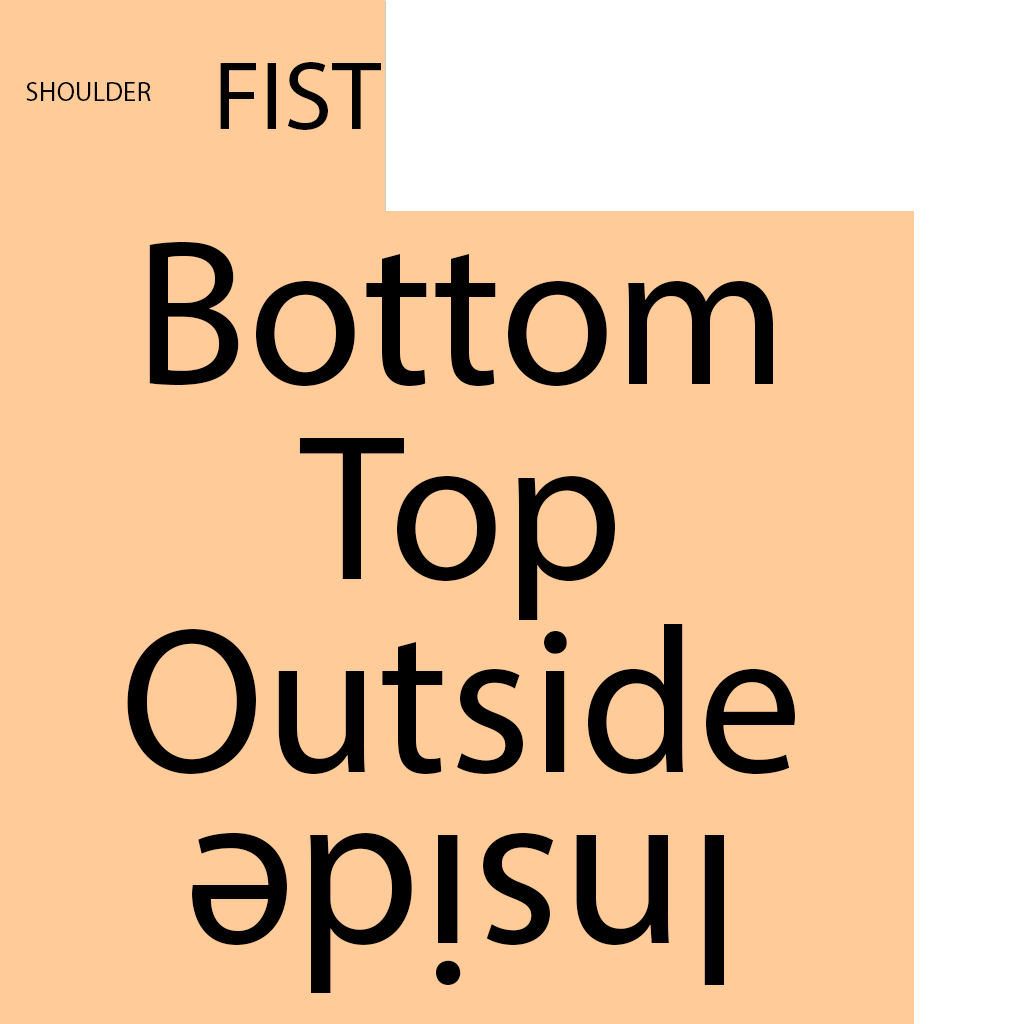
<style>
.page{position:relative;width:1024px;height:1024px;background:#ffcc99}
.page>*{position:absolute;margin:0}
.t1{font:98px "MyriadPro-Regular";color:#000000}
.t2{font:27px "MyriadPro-Regular";color:#000000}
.t3{font:208.7px "MyriadPro-Regular";color:#000000}
.t4{font:222.6px "MyriadPro-Regular";color:#000000}
</style>
<div class="page">
<p class="t1" style="left:220px;top:62px;width:161px;height:68px">FIST</p>
<p class="t2" style="left:26px;top:82px;width:125px;height:19px">SHOULDER</p>
<p class="t3" style="left:149px;top:242px;width:624px;height:144px">Bottom</p>
<p class="t3" style="left:299px;top:438px;width:316px;height:182px">Top</p>
<p class="t3" style="left:127px;top:624px;width:668px;height:151px">Outside</p>
<p class="t4" style="left:192px;top:832px;width:532px;height:161px;rotate:180deg">Inside</p>
</div>
